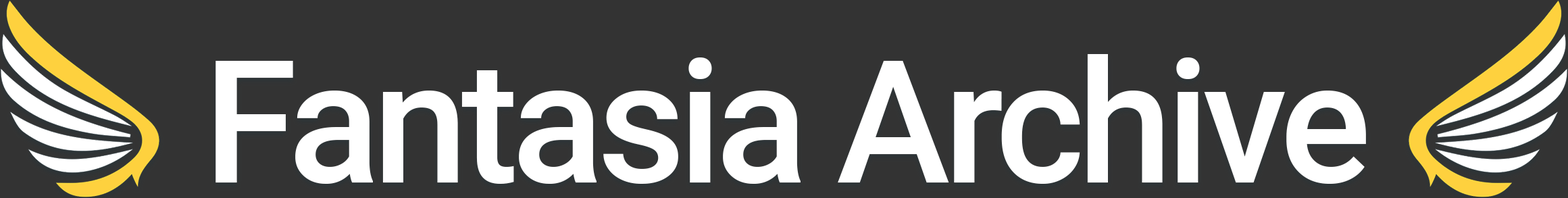
<style>
.page{position:relative;width:1568px;height:198px;background:#333333}
.page>*{position:absolute;margin:0}
.t1{font:170.9px "Roboto-Medium";letter-spacing:-0.04em;color:#ffffff}
</style>
<div class="page">
<p class="t1" style="left:216px;top:54px;width:1150px;height:130px">Fantasia Archive</p>
</div>
